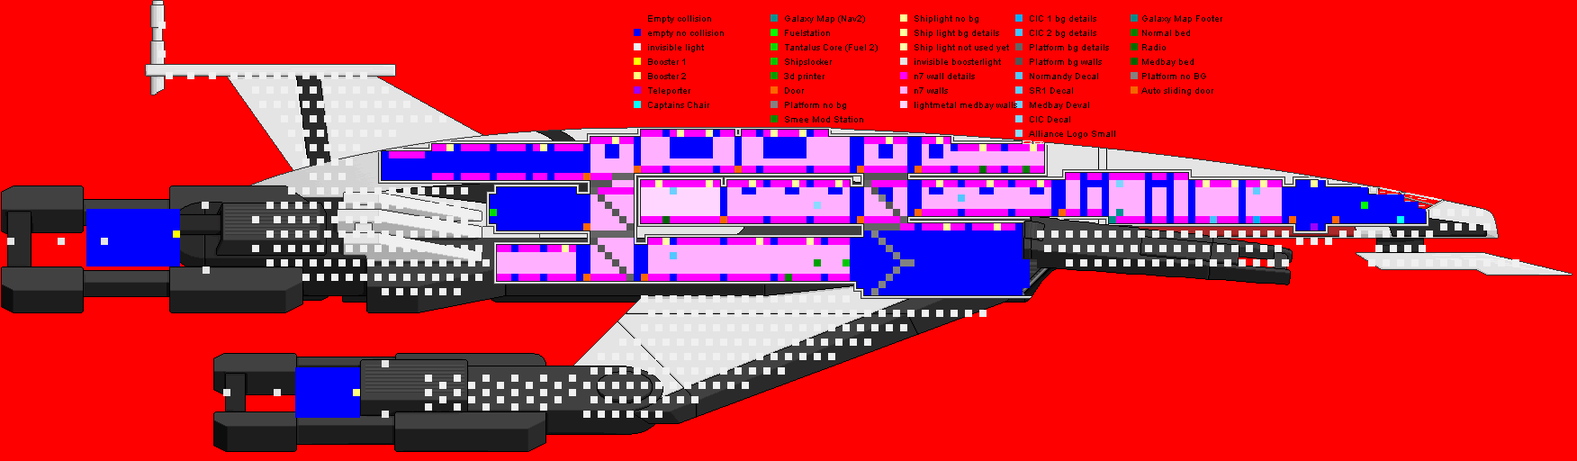
<style>
.page{position:relative;width:1577px;height:461px;background:#ff0000}
.page>*{position:absolute;margin:0}
.t1{font:9px/14.4px "ArialMT";color:#000000}
</style>
<div class="page">
<p class="t1" style="left:648px;top:15px;width:76px;height:95px">Empty collision<br>empty no collision<br>invisible light<br>Booster 1<br>Booster 2<br>Teleporter<br>Captains Chair</p>
<p class="t1" style="left:784px;top:15px;width:94px;height:107px">Galaxy Map (Nav2)<br>Fuelstation<br>Tantalus Core (Fuel 2)<br>Shipslocker<br>3d printer<br>Door<br>Platform no bg<br>Smee Mod Station</p>
<p class="t1" style="left:914px;top:15px;width:103px;height:95px">Shiplight no bg<br>Ship light bg details<br>Ship light not used yet<br>invisible boosterlight<br>n7 wall details<br>n7 walls<br>lightmetal medbay walls</p>
<p class="t1" style="left:1029px;top:15px;width:86px;height:124px">CIC 1 bg details<br>CIC 2 bg details<br>Platform bg details<br>Platform bg walls<br>Normandy Decal<br>SR1 Decal<br>Medbay Deval<br>CIC Decal<br>Alliance Logo Small</p>
<p class="t1" style="left:1141px;top:15px;width:81px;height:80px">Galaxy Map Footer<br>Normal bed<br>Radio<br>Medbay bed<br>Platform no BG<br>Auto sliding door</p>
</div>
